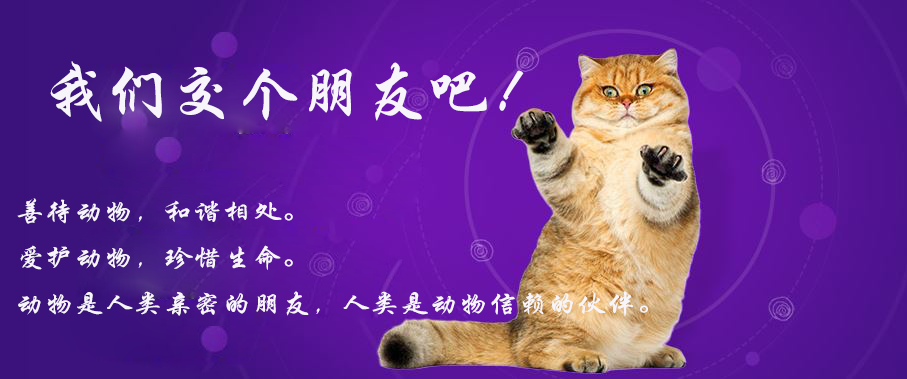
<style>
.page{position:relative;width:907px;height:379px}
.page>*{position:absolute;margin:0}
.t1{font:64px "STXingkai";color:#f8f5fa}
.t2{font:26.4px "STXingkai";color:#f8f5fa;scale:1.12 1}
</style>
<div class="page">
<p class="t1" style="left:50px;top:61px;width:474px;height:61px">我们交个朋友吧！</p>
<p class="t2" style="left:17px;top:198px;width:631px;height:119px">善待动物，和谐相处。<br>爱护动物，珍惜生命。<br>动物是人类亲密的朋友，人类是动物信赖的伙伴。</p>
</div>
